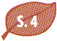
<style>
.page{position:relative;width:57px;height:41px}
.page>*{position:absolute;margin:0}
.t1{font:17px "MyriadPro-BoldCond";color:#ffffff}
</style>
<div class="page">
<p class="t1" style="left:17px;top:15px;width:21px;height:13px">S. 4</p>
</div>
